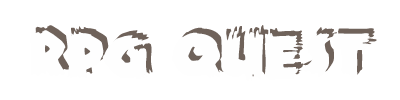
<style>
.page{position:relative;width:400px;height:100px;background:#ffffff}
.page>*{position:absolute;margin:0}
.t1{font:72px "ZombieA";color:#fefefe}
.t2{font:72px "ZombieA"}
</style>
<div class="page">
<p class="t1" style="left:30px;top:30px;width:342px;height:52px">rPG Quest</p>
<p class="t2" style="left:35px;top:25px;width:342px;height:52px">rPG Quest</p>
</div>
